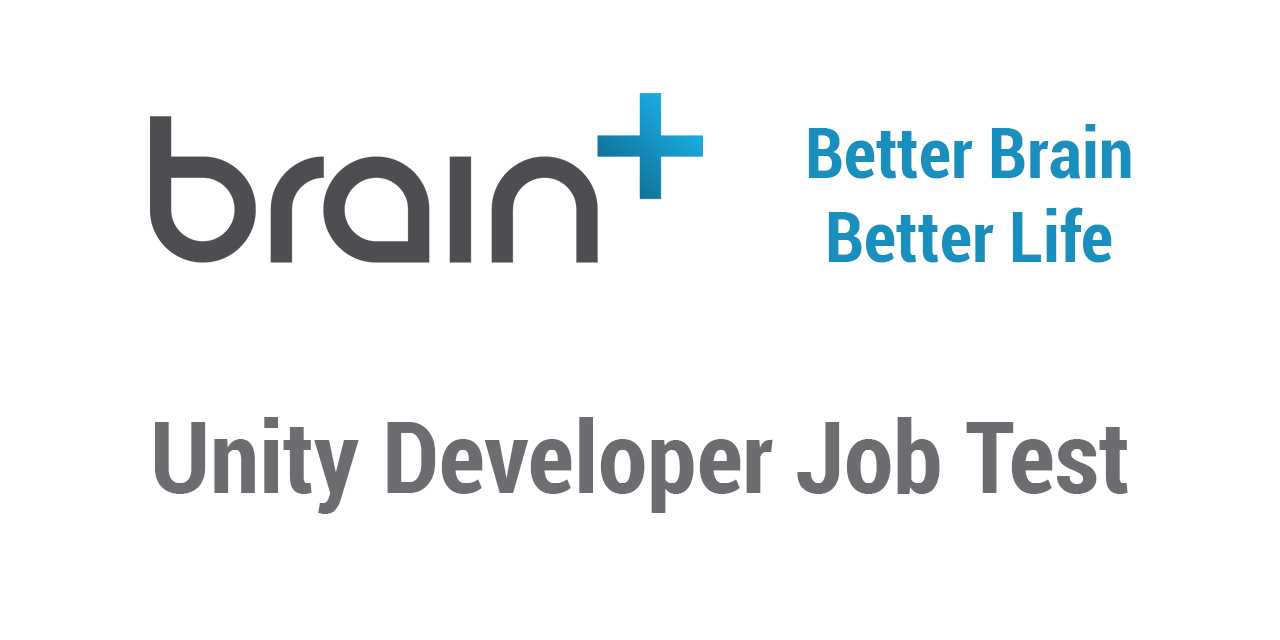
<style>
.page{position:relative;width:1280px;height:640px;background:#ffffff}
.page>*{position:absolute;margin:0}
.t1{font:70px "Roboto-BoldCondensed";color:#198fbd}
.t2{font:100px "Roboto-BoldCondensed";color:#6b6d70}
</style>
<div class="page">
<p class="t1" style="left:808px;top:124px;width:323px;height:139px;text-align:center">Better Brain<br>Better Life</p>
<p class="t2" style="left:155px;top:417px;width:973px;height:97px">Unity Developer Job Test</p>
</div>
